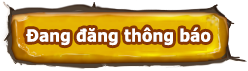
<style>
.page{position:relative;width:248px;height:71px;background:#ffffff}
.page>*{position:absolute;margin:0}
.t1{font:29px "Verdana-Bold";color:#ffffff;scale:0.91 1}
</style>
<div class="page">
<p class="t1" style="left:26px;top:27px;width:185px;height:19px">Đang đăng thông báo</p>
</div>
